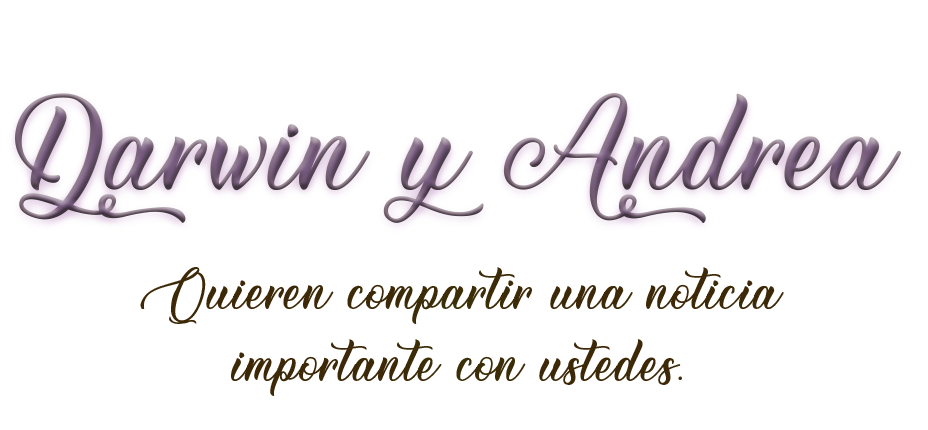
<style>
.page{position:relative;width:928px;height:430px;background:#ffffff}
.page>*{position:absolute;margin:0}
.t1{font:60px "BettyMollyPersonalUse";color:#3d2807}
</style>
<div class="page">
<p class="t1" style="left:140px;top:267px;width:644px;height:129px;text-align:center">Quieren compartir una noticia importante con ustedes.</p>
</div>
